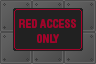
<style>
.page{position:relative;width:96px;height:64px;background:#212121}
.page>*{position:absolute;margin:0}
.t1{font:12px "HelveticaRoundedLTStd-BdCn";color:#a4032b}
</style>
<div class="page">
<p class="t1" style="left:19px;top:19px;width:57px;height:24px;text-align:center">RED ACCESS<br>ONLY</p>
</div>
